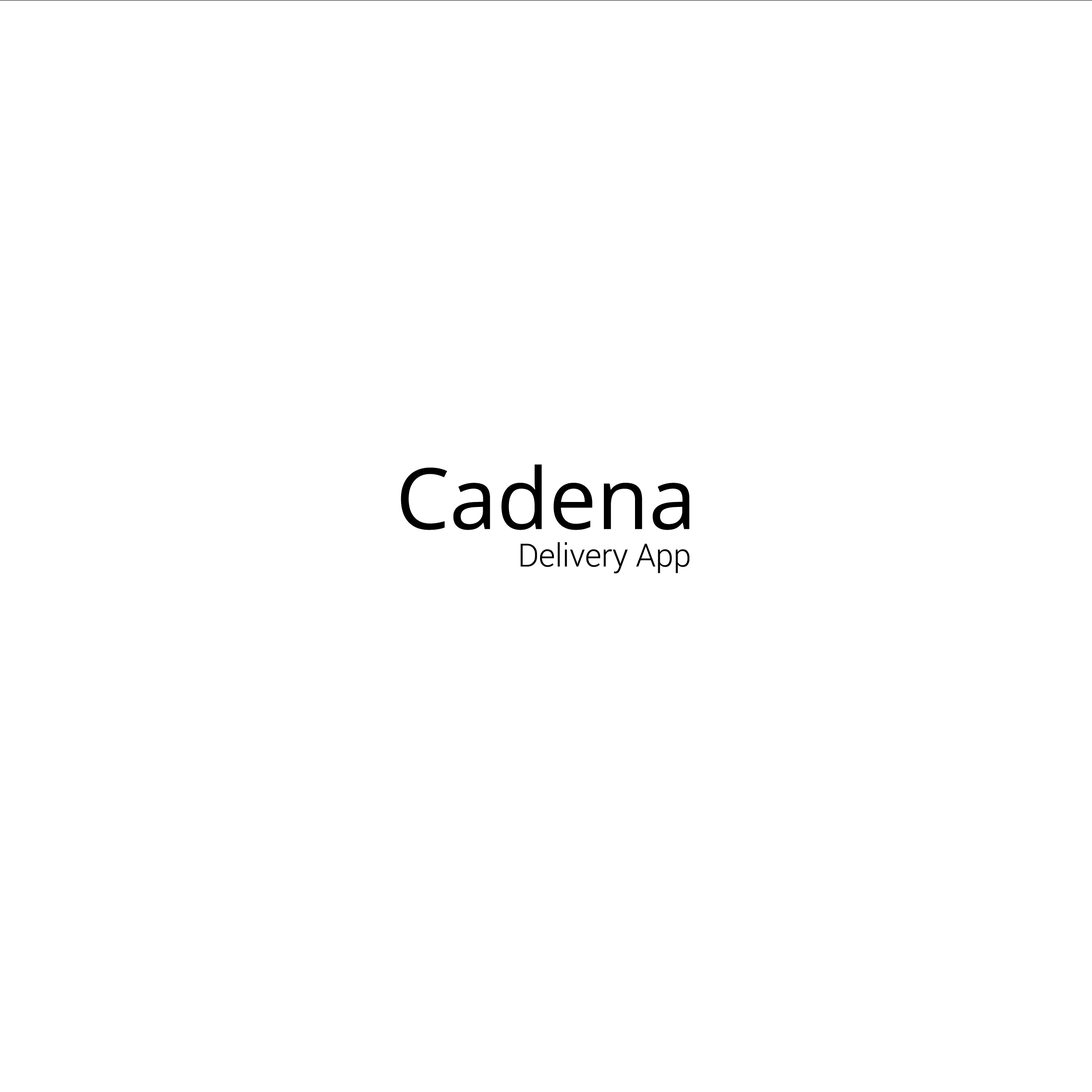
<style>
.page{position:relative;width:1092px;height:1092px;background:#ffffff}
.page>*{position:absolute;margin:0}
.t1{font:84.7px "OpenSans";color:#000000}
.t2{font:31.8px "Roboto-Light";color:#000000}
</style>
<div class="page">
<p class="t1" style="left:401px;top:464px;width:288px;height:66px">Cadena</p>
<p class="t2" style="left:520px;top:542px;width:169px;height:31px">Delivery App</p>
</div>
